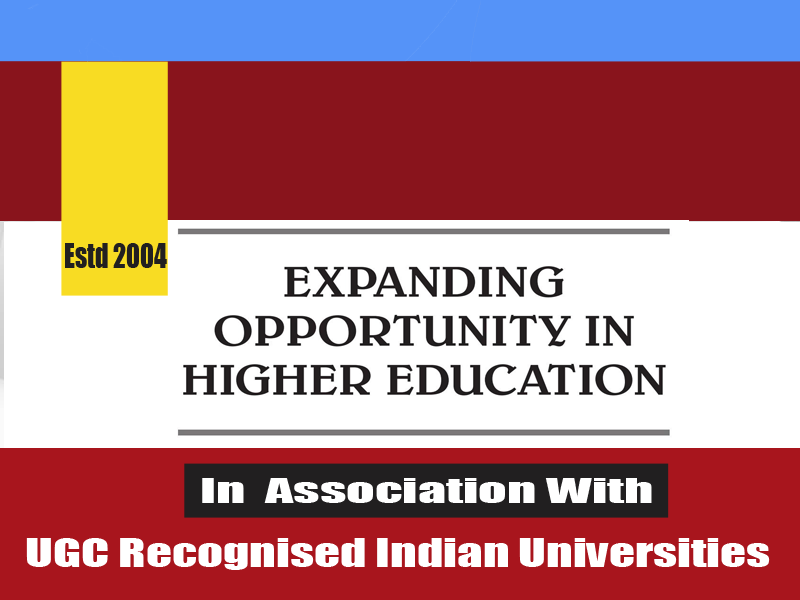
<style>
.page{position:relative;width:800px;height:600px;background:#ffffff}
.page>*{position:absolute;margin:0}
.t1{font:31.5px "Impact";color:#211f20;scale:0.83 1}
.t2{font:31.5px "Impact";color:#ffffff;scale:1.78 1}
.t3{font:36.5px "Impact";color:#ffffff;scale:1.39 1}
</style>
<div class="page">
<p class="t1" style="left:65px;top:243px;width:102px;height:25px">Estd 2004</p>
<p class="t2" style="left:202px;top:478px;width:450px;height:25px">In  Association With</p>
<p class="t3" style="left:26px;top:538px;width:744px;height:32px">UGC Recognised Indian Universities</p>
</div>
